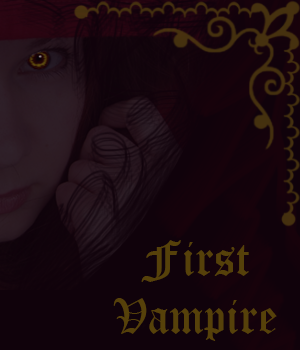
<style>
.page{position:relative;width:300px;height:350px;background:#10020b}
.page>*{position:absolute;margin:0}
.t1{font:48px "OldEnglishTextMT";color:#56410a}
</style>
<div class="page">
<p class="t1" style="left:113px;top:240px;width:164px;height:101px;text-align:center">First<br>Vampire</p>
</div>
